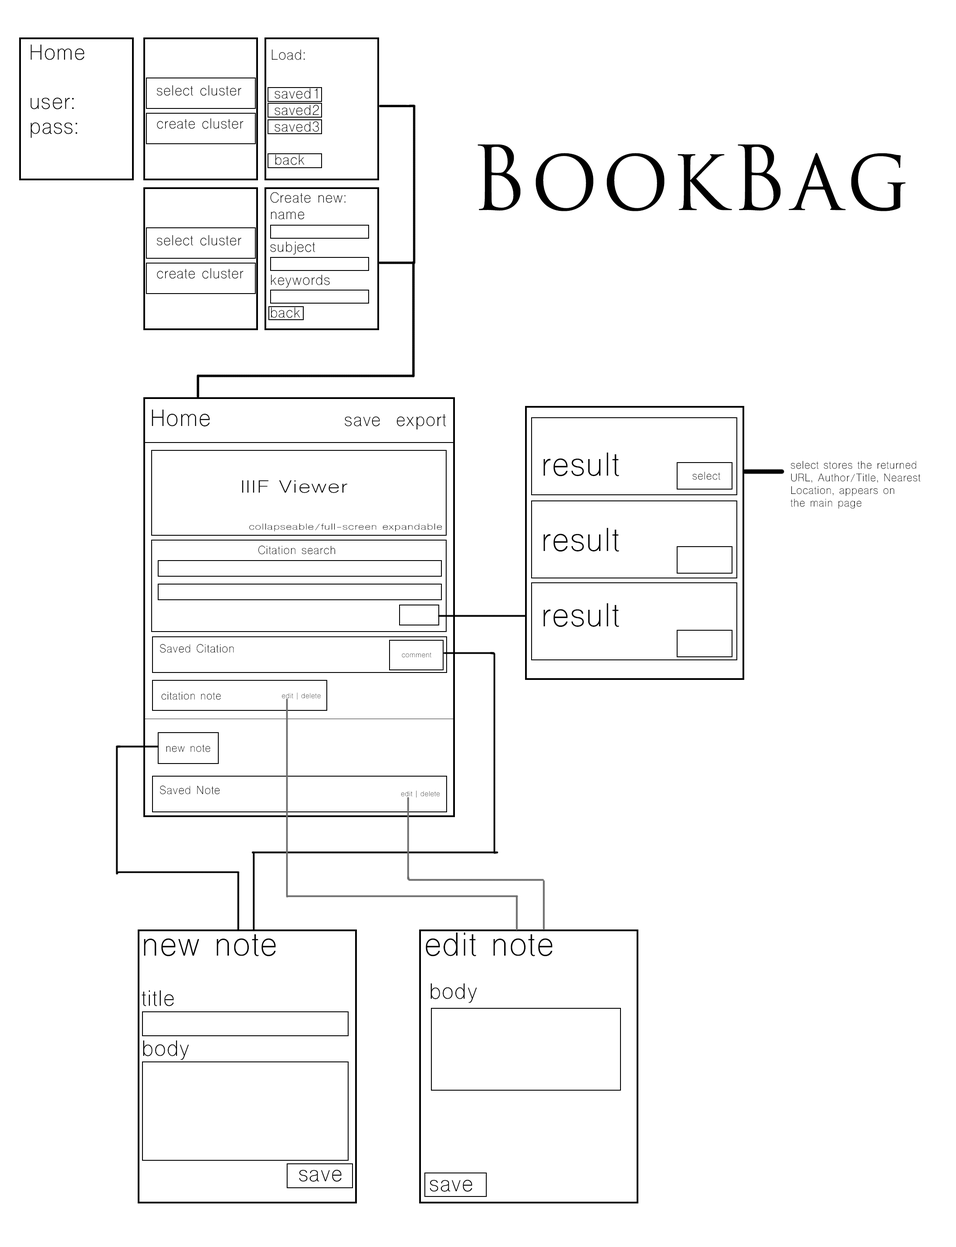
<style>
.page{position:relative;width:956px;height:1247px;background:#ffffff}
.page>*{position:absolute;margin:0}
.t1{font:20.6px "ShreeDev0714";letter-spacing:0.05em;color:#000000;scale:0.95 1}
.t2{font:13.7px "ShreeDev0714";letter-spacing:0.05em;color:#000000;scale:0.95 1}
.t3{font:87.1px "TrajanPro-Regular";letter-spacing:0.05em;color:#000000;scale:0.95 1}
.t4{font:17.3px "ShreeDev0714";letter-spacing:0.05em;color:#000000;scale:0.95 1}
.t5{font:22.3px "ShreeDev0714";letter-spacing:0.05em;color:#000000;scale:0.95 1}
.t6{font:31.4px "ShreeDev0714";letter-spacing:0.05em;color:#000000;scale:0.95 1}
.t7{font:10.5px "ShreeDev0714";letter-spacing:0.05em;color:#000000;scale:0.95 1}
.t8{font:16.6px "ShreeDev0714";letter-spacing:0.05em;color:#000000;scale:1.27 1}
.t9{font:8.3px "ShreeDev0714";letter-spacing:0.05em;color:#000000;scale:1.27 1}
.t10{font:11.1px "ShreeDev0714";letter-spacing:0.05em;color:#000000;scale:0.95 1}
.t11{font:7px "ShreeDev0714";letter-spacing:0.05em;color:#000000;scale:0.95 1}
.t12{font:20.9px "ShreeDev0714";letter-spacing:0.05em;color:#000000;scale:0.95 1}
</style>
<div class="page">
<p class="t1" style="left:30px;top:44px;width:55px;height:94px">Home<br><br>user:<br>pass:</p>
<p class="t2" style="left:272px;top:49px;width:33px;height:11px">Load:</p>
<p class="t2" style="left:157px;top:85px;width:87px;height:44px">select cluster<br><br>create cluster</p>
<p class="t2" style="left:274px;top:88px;width:45px;height:77px">saved1<br>saved2<br>saved3<br><br>back</p>
<p class="t3" style="left:478px;top:144px;width:428px;height:67px">BookBag</p>
<p class="t2" style="left:270px;top:192px;width:76px;height:126px">Create new:<br>name<br><br>subject<br><br>keywords<br><br>back</p>
<p class="t2" style="left:157px;top:235px;width:87px;height:44px">select cluster<br><br>create cluster</p>
<p class="t4" style="left:152px;top:410px;width:294px;height:20px"><span class="t5">Home              </span>save  export</p>
<p class="t6" style="left:543px;top:453px;width:76px;height:174px">result<br><br>result<br><br>result</p>
<p class="t7" style="left:790px;top:461px;width:131px;height:48px">select stores the returned<br>URL, Author/Title, Nearest<br>Location, appears on<br>the main page</p>
<p class="t7" style="left:692px;top:472px;width:28px;height:8px">select</p>
<p class="t8" style="left:242px;top:480px;width:105px;height:13px">IIIF Viewer</p>
<p class="t9" style="left:249px;top:524px;width:193px;height:8px">collapseable/full-screen expandable</p>
<p class="t10" style="left:258px;top:545px;width:77px;height:10px">Citation search</p>
<p class="t10" style="left:160px;top:644px;width:74px;height:9px">Saved Citation</p>
<p class="t11" style="left:402px;top:653px;width:29px;height:5px">comment</p>
<p class="t7" style="left:161px;top:692px;width:60px;height:8px">citation note</p>
<p class="t11" style="left:282px;top:693px;width:39px;height:7px">edit | delete</p>
<p class="t7" style="left:166px;top:745px;width:44px;height:7px">new note</p>
<p class="t10" style="left:160px;top:786px;width:60px;height:9px">Saved Note</p>
<p class="t11" style="left:401px;top:791px;width:39px;height:7px">edit | delete</p>
<p class="t12" style="left:142px;top:935px;width:200px;height:247px"><span class="t6">new note<br></span><br>title<br><br>body<br><br><br><br><br>          save</p>
<p class="t6" style="left:426px;top:933px;width:126px;height:24px">edit note</p>
<p class="t12" style="left:430px;top:983px;width:47px;height:209px">body<br><br><br><br><br><br><br><br><br><br><br>save</p>
</div>
